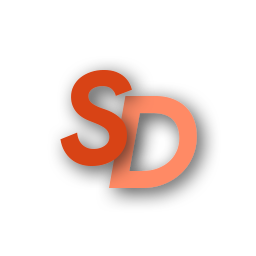
<style>
.page{position:relative;width:256px;height:256px;background:#ffffff}
.page>*{position:absolute;margin:0}
.t1{font:129px "ProductSans-BoldItalic";letter-spacing:-0.22em;color:#d84315}
.t2{font:129px "ProductSans-BoldItalic";letter-spacing:-0.22em;color:#ff8a65}
</style>
<div class="page">
<p class="t1" style="left:60px;top:70px;width:72px;height:96px">S</p>
<p class="t2" style="left:109px;top:96px;width:88px;height:92px">D</p>
</div>
